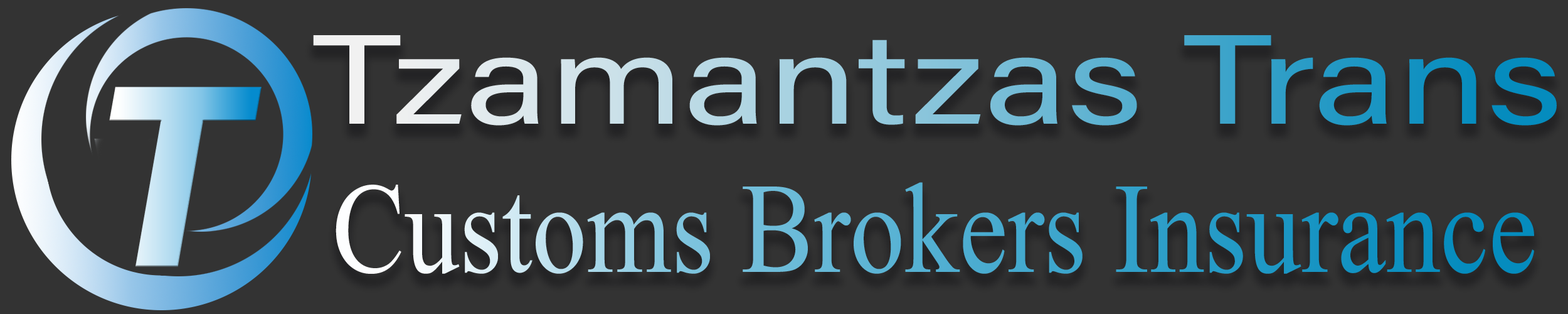
<style>
.page{position:relative;width:1568px;height:314px;background:#333333}
.page>*{position:absolute;margin:0}
.t1{font:127px "AcuminConcept-Regular";scale:1.26 1}
.t2{font:191.7px "Microsoft-Himalaya";scale:0.85 1}
</style>
<div class="page">
<p class="t1" style="left:313px;top:35px;width:1244px;height:90px">Tzamantzas Trans</p>
<p class="t2" style="left:336px;top:182px;width:1198px;height:91px">Customs Brokers Insurance</p>
</div>
